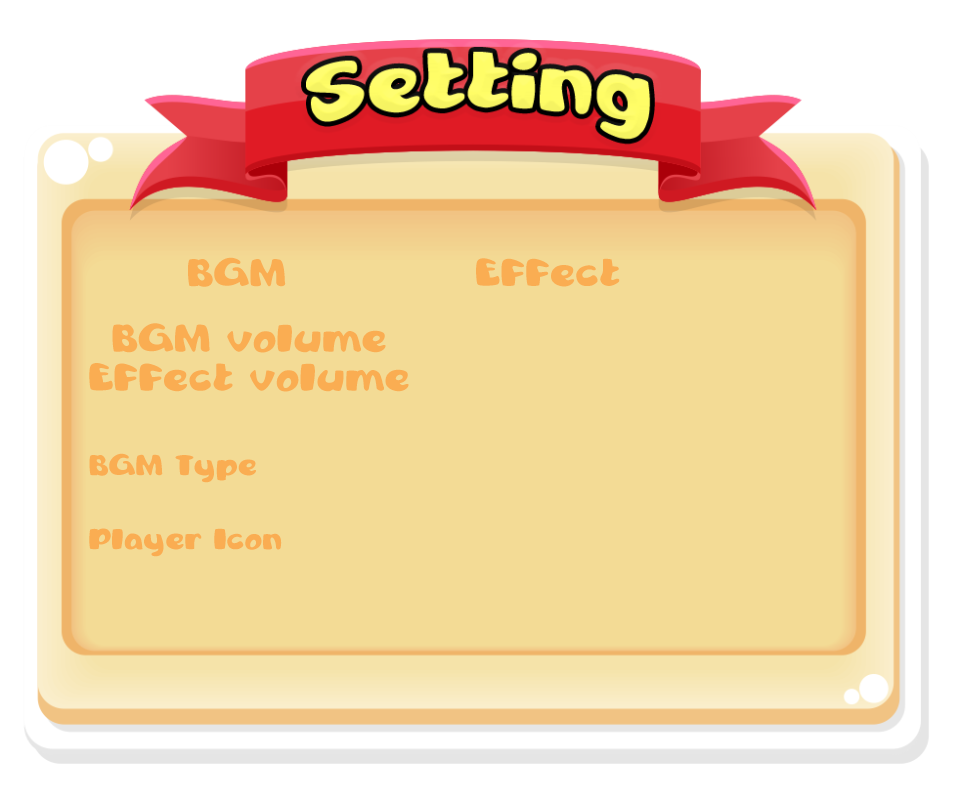
<style>
.page{position:relative;width:960px;height:802px;background:#f3db95}
.page>*{position:absolute;margin:0}
.t1{font:32px "conch";color:#faad52}
.t2{font:24px "conch";color:#faad52}
</style>
<div class="page">
<p class="t1" style="left:188px;top:257px;width:98px;height:30px">BGM</p>
<p class="t1" style="left:476px;top:258px;width:144px;height:29px">Effect</p>
<p class="t1" style="left:112px;top:323px;width:274px;height:30px">BGM volume</p>
<p class="t1" style="left:89px;top:363px;width:320px;height:29px">Effect volume</p>
<p class="t2" style="left:89px;top:453px;width:167px;height:30px">BGM Type</p>
<p class="t2" style="left:89px;top:528px;width:193px;height:29px">Player Icon</p>
</div>
